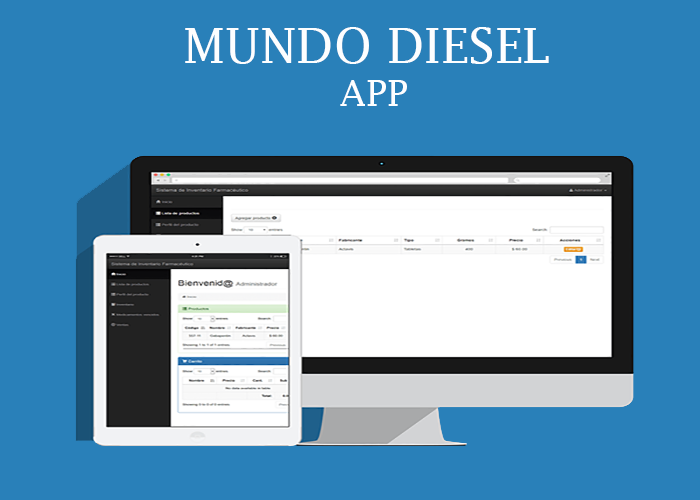
<style>
.page{position:relative;width:700px;height:500px;background:#2980b9}
.page>*{position:absolute;margin:0}
.t1{font:48px "LucidaFax";color:#fdfeff}
.t2{font:36px "LucidaFax";color:#fdfeff}
</style>
<div class="page">
<p class="t1" style="left:185px;top:27px;width:364px;height:79px;text-align:center">MUNDO DIESEL <br><span class="t2">APP</span></p>
</div>
